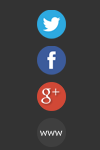
<style>
.page{position:relative;width:100px;height:150px;background:#333333}
.page>*{position:absolute;margin:0}
.t1{font:10px "TrebuchetMS"}
</style>
<div class="page">
<p class="t1" style="left:40px;top:130px;width:23px;height:6px">www</p>
</div>
